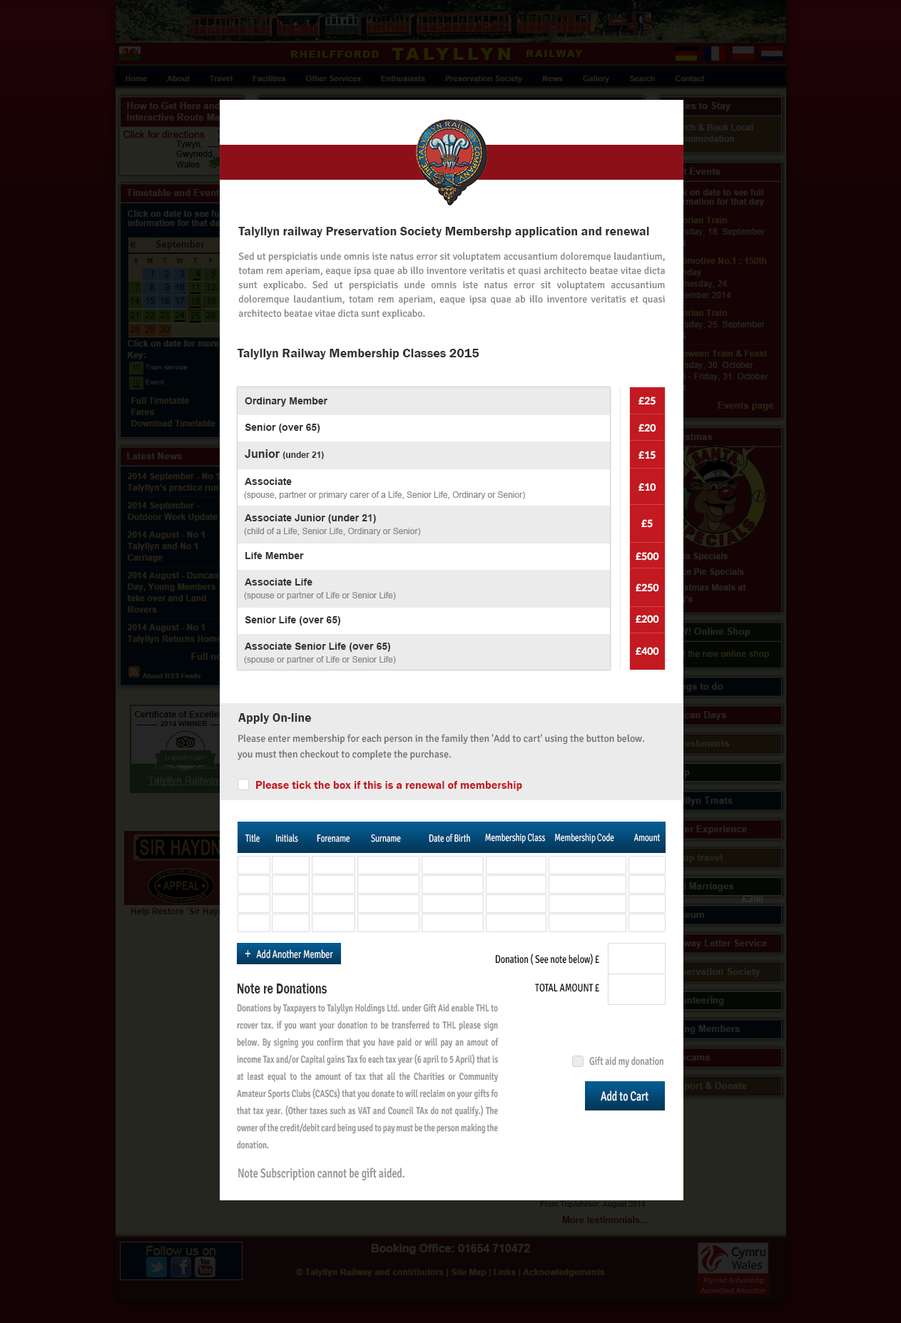
<style>
.page{position:relative;width:901px;height:1323px;background:#ffffff}
.page>*{position:absolute;margin:0}
.t1{font:12.8px "FranklinGothic-Demi";color:#333333}
.t2{font:10px/14.3px "SignikaNegative-Regular";color:#848484}
.t3{font:10px "Arial-BoldMT";color:#333333}
.t4{font:10px "Lato-Bold";color:#ffffff}
.t5{font:8.6px "Arial-BoldMT";color:#333333}
.t6{font:11.4px "Arial-BoldMT";color:#333333}
.t7{font:8.6px "ArialMT";color:#848484}
.t8{font:10px/10px "SignikaNegative-Regular";color:#6e6e6e}
.t9{font:11.4px "FranklinGothic-Demi";color:#c31921}
.t10{font:10.2px "SignikaNegative-Light";color:#ffffff;scale:0.77 1}
.t11{font:10px "Lato-Bold";color:#333333}
.t12{font:14.8px "ArialMT";color:#ffffff;scale:0.77 1}
.t13{font:11.1px "SignikaNegative-Light";color:#ffffff;scale:0.77 1}
.t14{font:11.1px "SignikaNegative-Regular";color:#000000;scale:0.77 1}
.t15{font:14.8px "FranklinGothic-Demi";color:#333333;scale:0.77 1}
.t16{font:10.2px/17.1px "SignikaNegative-Semibold";color:#969696;scale:0.77 1}
.t17{font:11.1px "SignikaNegative-Semibold";color:#969696;scale:0.77 1}
.t18{font:13px "SignikaNegative-Regular";color:#ffffff;scale:0.77 1}
.t19{font:13px "SignikaNegative-Semibold";color:#969696;scale:0.77 1}
</style>
<div class="page">
<p class="t1" style="left:238px;top:227px;width:411px;height:11px">Talyllyn railway Preservation Society Membershp application and renewal</p>
<p class="t2" style="left:238px;top:252px;width:427px;height:68px;text-align:justify">Sed ut perspiciatis unde omnis iste natus error sit voluptatem accusantium doloremque laudantium, totam rem aperiam, eaque ipsa quae ab illo inventore veritatis et quasi architecto beatae vitae dicta sunt explicabo. Sed ut perspiciatis unde omnis iste natus error sit voluptatem accusantium doloremque laudantium, totam rem aperiam, eaque ipsa quae ab illo inventore veritatis et quasi architecto beatae vitae dicta sunt explicabo.</p>
<p class="t1" style="left:238px;top:349px;width:241px;height:11px">Talyllyn Railway Membership Classes 2015</p>
<p class="t3" style="left:245px;top:397px;width:82px;height:10px">Ordinary Member</p>
<p class="t4" style="left:639px;top:397px;width:17px;height:8px">£25</p>
<p class="t3" style="left:245px;top:424px;width:75px;height:9px">Senior (over 65)</p>
<p class="t4" style="left:639px;top:424px;width:17px;height:8px">£20</p>
<p class="t5" style="left:245px;top:449px;width:79px;height:10px"><span class="t6">Junior </span>(under 21)</p>
<p class="t4" style="left:639px;top:451px;width:17px;height:8px">£15</p>
<p class="t3" style="left:245px;top:478px;width:47px;height:7px">Associate</p>
<p class="t4" style="left:639px;top:483px;width:17px;height:9px">£10</p>
<p class="t7" style="left:244px;top:492px;width:281px;height:7px">(spouse, partner or primary carer of a Life, Senior Life, Ordinary or Senior)</p>
<p class="t3" style="left:245px;top:514px;width:131px;height:10px">Associate Junior (under 21)</p>
<p class="t4" style="left:641px;top:519px;width:12px;height:9px">£5</p>
<p class="t7" style="left:244px;top:528px;width:177px;height:8px">(child of a Life, Senior Life, Ordinary or Senior)</p>
<p class="t3" style="left:245px;top:552px;width:59px;height:7px">Life Member</p>
<p class="t4" style="left:636px;top:552px;width:23px;height:9px">£500</p>
<p class="t3" style="left:245px;top:579px;width:67px;height:7px">Associate Life</p>
<p class="t7" style="left:244px;top:592px;width:152px;height:8px">(spouse or partner of Life or Senior Life)</p>
<p class="t4" style="left:636px;top:584px;width:23px;height:8px">£250</p>
<p class="t3" style="left:245px;top:616px;width:95px;height:10px">Senior Life (over 65)</p>
<p class="t4" style="left:636px;top:615px;width:23px;height:9px">£200</p>
<p class="t3" style="left:245px;top:643px;width:145px;height:9px">Associate Senior Life (over 65)</p>
<p class="t4" style="left:636px;top:647px;width:23px;height:9px">£400</p>
<p class="t7" style="left:244px;top:656px;width:152px;height:8px">(spouse or partner of Life or Senior Life)</p>
<p class="t1" style="left:238px;top:713px;width:73px;height:11px">Apply On-line</p>
<p class="t8" style="left:238px;top:734px;width:407px;height:27px">Please enter membership for each person in the family then 'Add to cart' using the button below. <br>you must then checkout to complete the purchase.</p>
<p class="t9" style="left:256px;top:781px;width:266px;height:10px">Please tick the box if this is a renewal of membership</p>
<p class="t10" style="left:245px;top:834px;width:15px;height:9px">Title</p>
<p class="t10" style="left:276px;top:834px;width:22px;height:9px">Initials</p>
<p class="t10" style="left:371px;top:834px;width:30px;height:9px">Surname</p>
<p class="t10" style="left:429px;top:834px;width:41px;height:9px">Date of Birth</p>
<p class="t10" style="left:485px;top:833px;width:60px;height:11px">Membership Class</p>
<p class="t10" style="left:555px;top:833px;width:59px;height:11px">Membership Code</p>
<p class="t10" style="left:634px;top:834px;width:26px;height:8px">Amount</p>
<p class="t10" style="left:317px;top:835px;width:33px;height:8px">Forename</p>
<p class="t11" style="left:742px;top:895px;width:21px;height:7px">£2<span class="t5">00</span></p>
<p class="t12" style="left:245px;top:950px;width:5px;height:7px">+</p>
<p class="t13" style="left:256px;top:950px;width:77px;height:9px">Add Another Member</p>
<p class="t14" style="left:495px;top:954px;width:104px;height:11px">Donation ( See note below) £</p>
<p class="t15" style="left:238px;top:984px;width:89px;height:10px">Note re Donations</p>
<p class="t14" style="left:535px;top:984px;width:64px;height:8px">TOTAL AMOUNT £</p>
<p class="t16" style="left:236px;top:1004px;width:263px;height:145px;text-align:justify">Donations by Taxpayers to Talyllyn Holdings Ltd. under Gift Aid enable THL to rcover tax. if you want your donation to be transferred to THL please sign below. By signing you confirm that you have paid or will pay an amout of income Tax and/or Capital gains Tax fo each tax year (6 april to 5 April) that is at least equal to the amount of tax that all the Charities or Community Amateur Sports Clubs (CASCs) that you donate to will reclaim on your gifts fo that tax year. (Other taxes such as VAT and Council TAx do not qualify.) The owner of the credit/debit card being used to pay must be the person making the donation.</p>
<p class="t17" style="left:589px;top:1057px;width:74px;height:11px">Gift aid my donation</p>
<p class="t18" style="left:601px;top:1091px;width:47px;height:11px">Add to Cart</p>
<p class="t19" style="left:238px;top:1168px;width:167px;height:13px">Note Subscription cannot be gift aided.</p>
</div>
